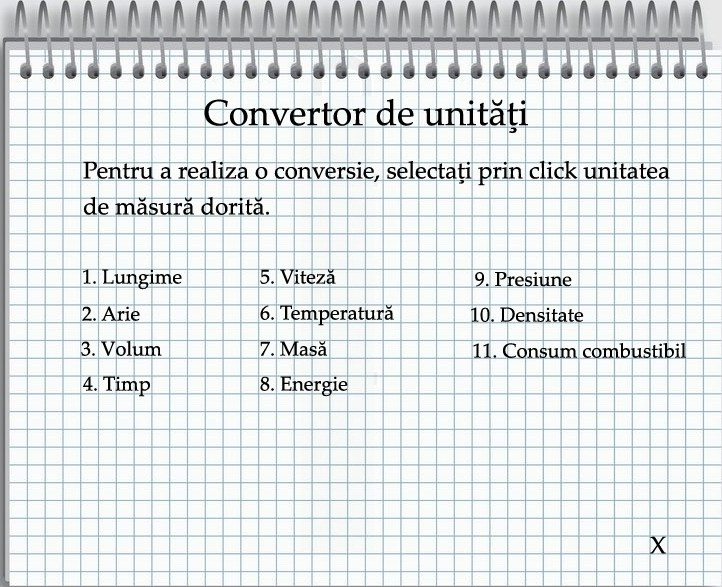
<style>
.page{position:relative;width:722px;height:587px}
.page>*{position:absolute;margin:0}
.t1{font:36px "PalatinoLinotype-Roman";color:#000000}
.t2{font:24px "PalatinoLinotype-Roman";color:#000000}
.t3{font:20px "PalatinoLinotype-Roman";color:#000000}
</style>
<div class="page">
<p class="t1" style="left:204px;top:98px;width:324px;height:35px">Convertor de unităţi</p>
<p class="t2" style="left:83px;top:160px;width:587px;height:26px">Pentru a realiza o conversie, selectaţi prin click unitatea</p>
<p class="t2" style="left:83px;top:196px;width:186px;height:19px">de măsură dorită.</p>
<p class="t3" style="left:83px;top:269px;width:99px;height:21px">1. Lungime</p>
<p class="t3" style="left:260px;top:269px;width:76px;height:15px">5. Viteză</p>
<p class="t3" style="left:475px;top:272px;width:97px;height:15px">9. Presiune</p>
<p class="t3" style="left:260px;top:305px;width:134px;height:21px">6. Temperatură</p>
<p class="t3" style="left:82px;top:306px;width:58px;height:15px">2. Arie</p>
<p class="t3" style="left:471px;top:307px;width:113px;height:15px">10. Densitate</p>
<p class="t3" style="left:81px;top:340px;width:81px;height:16px">3. Volum</p>
<p class="t3" style="left:260px;top:341px;width:67px;height:15px">7. Masă</p>
<p class="t3" style="left:473px;top:342px;width:213px;height:16px">11. Consum combustibil</p>
<p class="t3" style="left:83px;top:376px;width:67px;height:21px">4. Timp</p>
<p class="t3" style="left:260px;top:376px;width:88px;height:21px">8. Energie</p>
<p class="t2" style="left:650px;top:536px;width:16px;height:18px">X</p>
</div>
